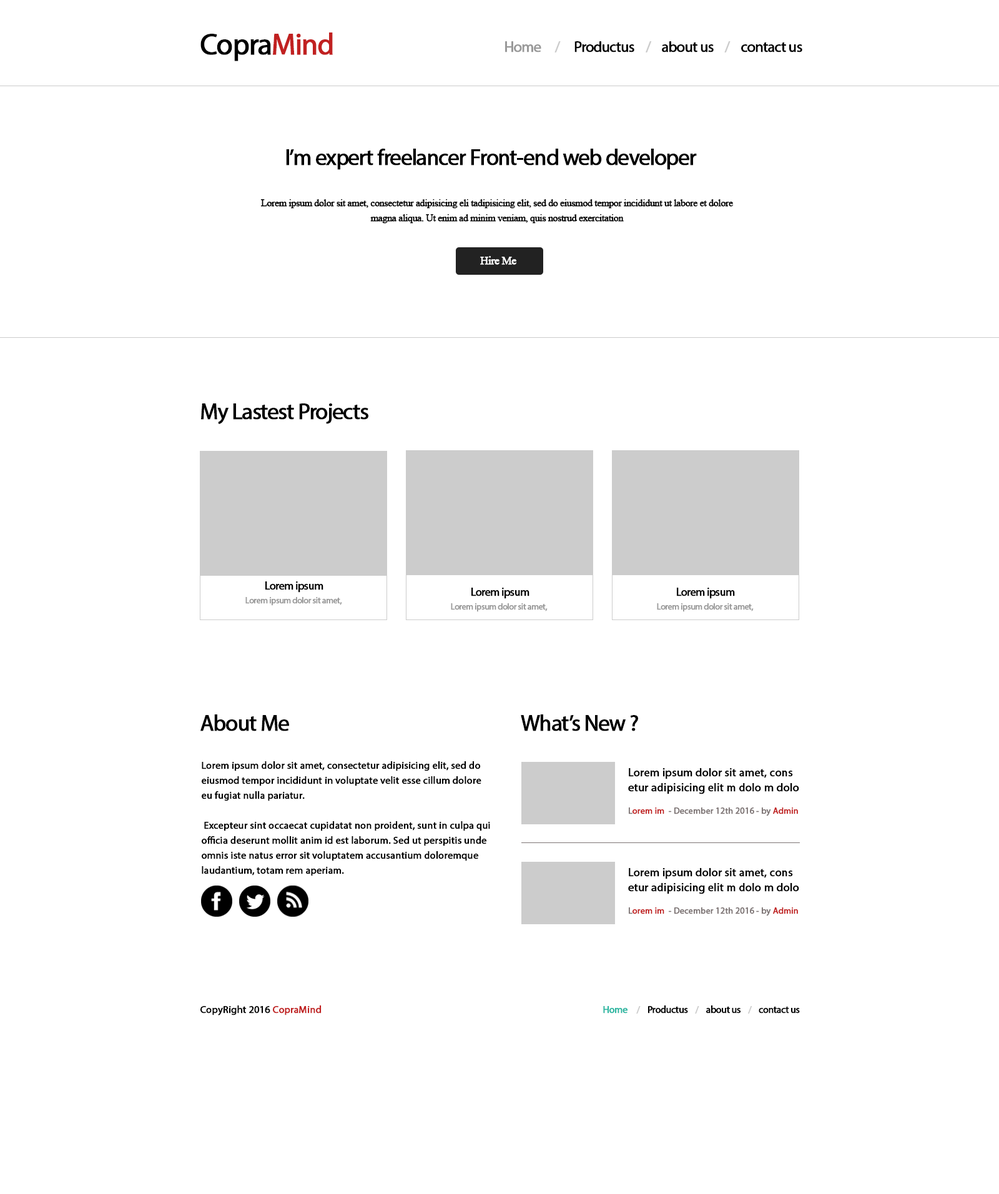
<style>
.page{position:relative;width:999px;height:1194px;background:#ffffff}
.page>*{position:absolute;margin:0}
.t1{font:30px "MyriadPro-Regular";letter-spacing:-0.05em;color:#000000;font-weight:bold}
.t2{font:30px "MyriadPro-Regular";letter-spacing:-0.05em;color:#c12121;font-weight:bold}
.t3{font:15px "MyriadPro-Regular";letter-spacing:-0.05em;color:#000000;font-weight:bold}
.t4{font:15px "MyriadPro-Regular";letter-spacing:-0.05em;color:#999999;font-weight:bold}
.t5{font:15px "MyriadPro-Regular";letter-spacing:-0.05em;color:#cccccc;font-weight:bold}
.t6{font:22.5px "MyriadPro-Regular";letter-spacing:-0.05em;color:#000000;font-weight:bold}
.t7{font:10px/15px "TimesNewRomanPSMT";letter-spacing:-0.05em;color:#000000;font-weight:bold}
.t8{font:11.2px "TimesNewRomanPSMT";letter-spacing:-0.05em;color:#ffffff;font-weight:bold}
.t9{font:11.2px "MyriadPro-Regular";letter-spacing:-0.05em;color:#000000;font-weight:bold}
.t10{font:8.7px "MyriadPro-Regular";letter-spacing:-0.05em;color:#999999;font-weight:bold}
.t11{font:10px/15px "MyriadPro-Regular";color:#000000;font-weight:bold}
.t12{font:11.2px/15px "MyriadPro-Regular";color:#000000;font-weight:bold}
.t13{font:8.7px "MyriadPro-Regular";color:#7d7474;font-weight:bold}
.t14{font:8.7px "MyriadPro-Regular";color:#c12121;font-weight:bold}
.t15{font:10px "MyriadPro-Regular";color:#000000;font-weight:bold}
.t16{font:10px "MyriadPro-Regular";color:#c12121;font-weight:bold}
.t17{font:10px "MyriadPro-Regular";letter-spacing:-0.05em;color:#000000;font-weight:bold}
.t18{font:10px "MyriadPro-Regular";letter-spacing:-0.05em;color:#29b6a1;font-weight:bold}
.t19{font:10px "MyriadPro-Regular";letter-spacing:-0.05em;color:#cccccc;font-weight:bold}
</style>
<div class="page">
<p class="t1" style="left:200px;top:32px;width:133px;height:29px">Copra<span class="t2">Mind</span></p>
<p class="t3" style="left:505px;top:41px;width:297px;height:11px"><span class="t4">Home     </span><span class="t5">/ </span>    Productus    <span class="t5">/</span>    about us    <span class="t5">/</span>    contact us</p>
<p class="t6" style="left:286px;top:149px;width:411px;height:21px">I’m expert freelancer Front-end web developer</p>
<p class="t7" style="left:260px;top:199px;width:473px;height:25px;text-align:center">Lorem ipsum dolor sit amet, consectetur adipisicing eli tadipisicing elit, sed do eiusmod tempor incididunt ut labore et dolore magna aliqua. Ut enim ad minim veniam, quis nostrud exercitation</p>
<p class="t8" style="left:480px;top:256px;width:36px;height:9px">Hire Me</p>
<p class="t6" style="left:201px;top:403px;width:167px;height:21px">My Lastest Projects</p>
<p class="t9" style="left:265px;top:581px;width:58px;height:11px">Lorem ipsum</p>
<p class="t9" style="left:471px;top:587px;width:58px;height:12px">Lorem ipsum</p>
<p class="t9" style="left:677px;top:587px;width:58px;height:12px">Lorem ipsum</p>
<p class="t10" style="left:245px;top:597px;width:97px;height:9px">Lorem ipsum dolor sit amet,</p>
<p class="t10" style="left:451px;top:603px;width:97px;height:9px">Lorem ipsum dolor sit amet,</p>
<p class="t10" style="left:657px;top:603px;width:97px;height:9px">Lorem ipsum dolor sit amet,</p>
<p class="t6" style="left:200px;top:714px;width:89px;height:17px">About Me</p>
<p class="t6" style="left:521px;top:714px;width:117px;height:17px">What’s New ?</p>
<p class="t11" style="left:202px;top:761px;width:288px;height:115px">Lorem ipsum dolor sit amet, consectetur adipisicing elit, sed do eiusmod tempor incididunt in voluptate velit esse cillum dolore eu fugiat nulla pariatur.<br><br> Excepteur sint occaecat cupidatat non proident, sunt in culpa qui officia deserunt mollit anim id est laborum. Sed ut perspitis unde omnis iste natus error sit voluptatem accusantium doloremque laudantium, totam rem aperiam.</p>
<p class="t12" style="left:628px;top:768px;width:171px;height:26px">Lorem ipsum dolor sit amet, cons etur adipisicing elit m dolo m dolo</p>
<p class="t13" style="left:629px;top:807px;width:169px;height:9px">L<span class="t14">orem im </span> - December 12th 2016 - by <span class="t14">Admin</span></p>
<p class="t12" style="left:628px;top:868px;width:171px;height:26px">Lorem ipsum dolor sit amet, cons etur adipisicing elit m dolo m dolo</p>
<p class="t13" style="left:629px;top:907px;width:169px;height:9px">L<span class="t14">orem im </span> - December 12th 2016 - by <span class="t14">Admin</span></p>
<p class="t15" style="left:200px;top:1005px;width:122px;height:10px">CopyRight 2016 <span class="t16">CopraMind</span></p>
<p class="t17" style="left:603px;top:1005px;width:197px;height:9px"><span class="t18">Home     </span><span class="t19">/</span>    Productus    <span class="t19">/</span>    about us    <span class="t19">/</span>    contact us</p>
</div>
